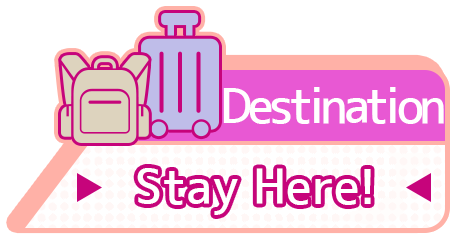
<style>
.page{position:relative;width:456px;height:240px;background:#ffffff}
.page>*{position:absolute;margin:0}
.t1{font:48px "JK-Gothic-M";letter-spacing:-0.09em;color:#ffffff}
.t2{font:48px "JK-Gothic-M";color:#ffffff}
</style>
<div class="page">
<p class="t1" style="left:223px;top:87px;width:221px;height:37px">Destination</p>
<p class="t2" style="left:137px;top:168px;width:234px;height:47px">Stay Here!</p>
</div>
